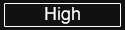
<style>
.page{position:relative;width:125px;height:30px;background:#111111}
.page>*{position:absolute;margin:0}
.t1{font:18px "ArialMT";color:#ffffff}
</style>
<div class="page">
<p class="t1" style="left:45px;top:7px;width:35px;height:17px">High</p>
</div>
